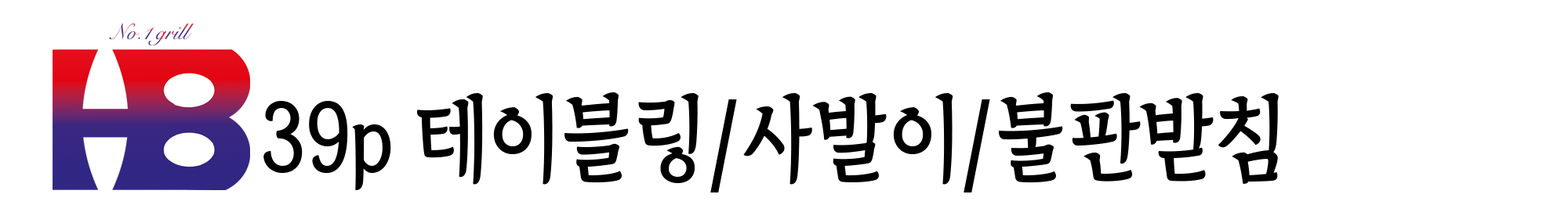
<style>
.page{position:relative;width:1568px;height:205px;background:#ffffff}
.page>*{position:absolute;margin:0}
.t1{font:93.7px "TheIndependenceHallofKorea-Regular";color:#000000;scale:0.89 1}
</style>
<div class="page">
<p class="t1" style="left:263px;top:93px;width:1016px;height:100px">39p 테이블링/사발이/불판받침</p>
</div>
